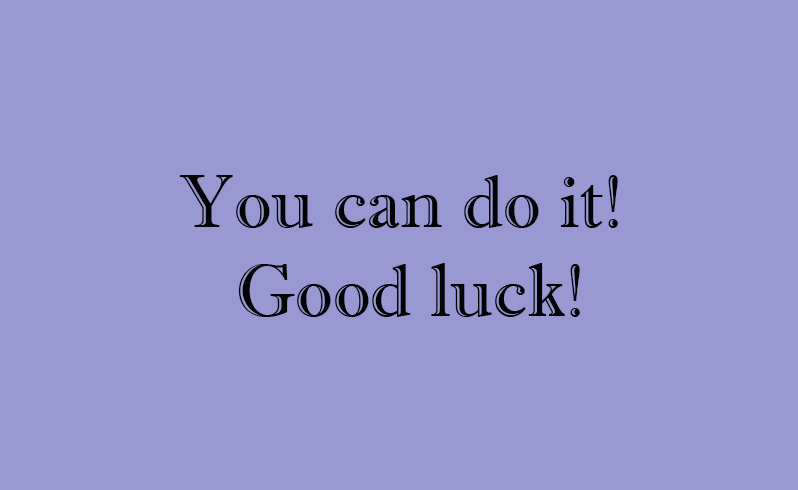
<style>
.page{position:relative;width:798px;height:490px;background:#9898d3}
.page>*{position:absolute;margin:0}
.t1{font:74.8px "ImprintMT-Shadow";color:#030303}
</style>
<div class="page">
<p class="t1" style="left:179px;top:175px;width:439px;height:142px;text-align:center">You can do it! <br>Good luck!</p>
</div>
